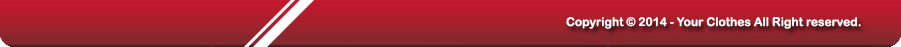
<style>
.page{position:relative;width:901px;height:47px}
.page>*{position:absolute;margin:0}
.t1{font:12px "ArialRoundedMTBold";color:#ffffff}
</style>
<div class="page">
<p class="t1" style="left:566px;top:17px;width:295px;height:12px">Copyright © 2014 - Your Clothes All Right reserved.</p>
</div>
